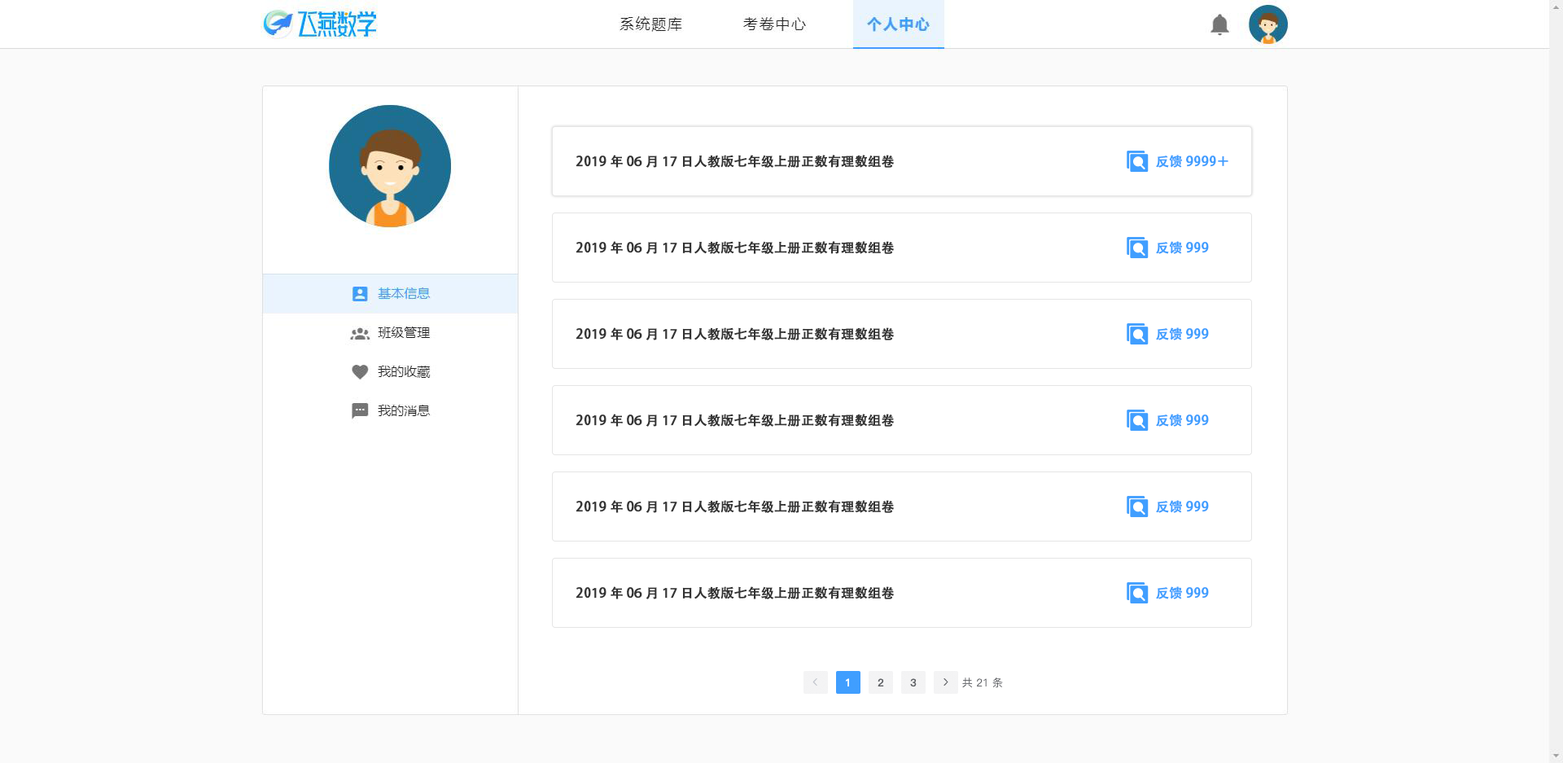
<style>
.page{position:relative;width:1563px;height:763px;background:#ffffff}
.page>*{position:absolute;margin:0}
.t1{font:13px "AdobeHeitiStd-Regular";color:#333333;font-weight:bold}
.t2{font:13px "AdobeHeitiStd-Regular";color:#409eff;font-weight:bold}
</style>
<div class="page">
<p class="t1" style="left:576px;top:155px;width:319px;height:13px">2019年06月17日人教版七年级上册正数有理数组卷</p>
<p class="t2" style="left:1156px;top:155px;width:73px;height:13px">反馈9999＋</p>
<p class="t1" style="left:576px;top:241px;width:319px;height:13px">2019年06月17日人教版七年级上册正数有理数组卷</p>
<p class="t2" style="left:1156px;top:241px;width:53px;height:13px">反馈999</p>
<p class="t1" style="left:576px;top:327px;width:319px;height:13px">2019年06月17日人教版七年级上册正数有理数组卷</p>
<p class="t2" style="left:1156px;top:327px;width:53px;height:13px">反馈999</p>
<p class="t1" style="left:576px;top:414px;width:319px;height:13px">2019年06月17日人教版七年级上册正数有理数组卷</p>
<p class="t2" style="left:1156px;top:414px;width:53px;height:13px">反馈999</p>
<p class="t1" style="left:576px;top:500px;width:319px;height:13px">2019年06月17日人教版七年级上册正数有理数组卷</p>
<p class="t2" style="left:1156px;top:500px;width:53px;height:13px">反馈999</p>
<p class="t1" style="left:576px;top:586px;width:319px;height:13px">2019年06月17日人教版七年级上册正数有理数组卷</p>
<p class="t2" style="left:1156px;top:586px;width:53px;height:13px">反馈999</p>
</div>
